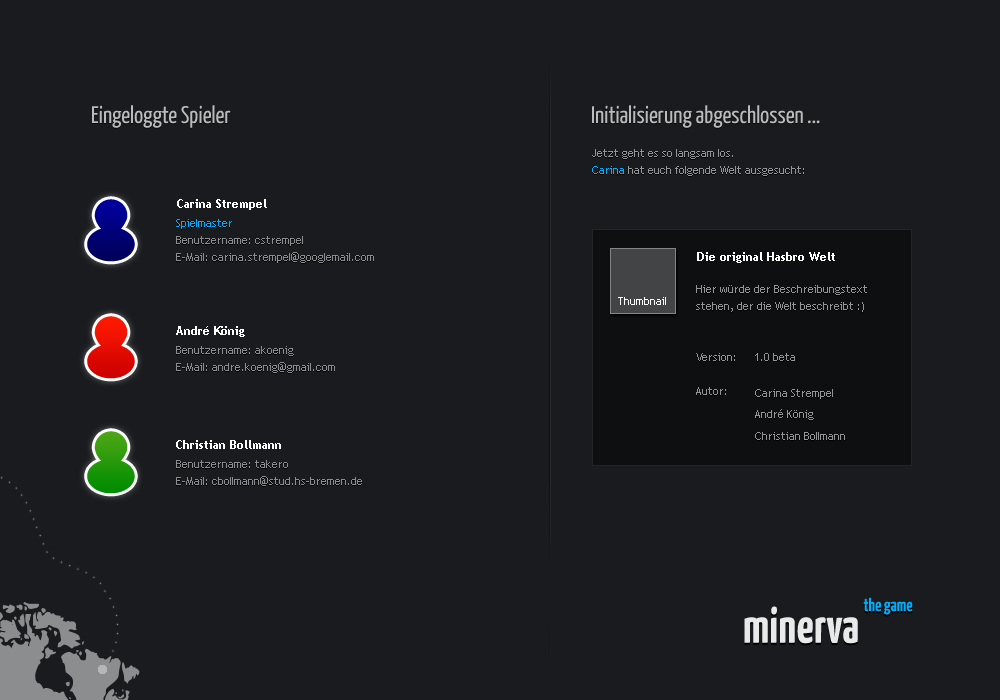
<style>
.page{position:relative;width:1000px;height:700px;background:#191b1e}
.page>*{position:absolute;margin:0}
.t1{font:24px "YanoneKaffeesatz-Regular";color:#babbbc}
.t2{font:11px/17px "TrebuchetMS";color:#939598}
.t3{font:11px/17px "TrebuchetMS";color:#01aefd}
.t4{font:12px "TrebuchetMS-Bold";color:#ffffff}
.t5{font:11px/17px "TrebuchetMS";color:#8c8d8f}
.t6{font:11px "TrebuchetMS";color:#ffffff}
.t7{font:11px "TrebuchetMS";color:#939598}
.t8{font:50px "YanoneKaffeesatz-Bold";color:#ffffff}
.t9{font:18px "YanoneKaffeesatz-Bold";color:#01aefd}
</style>
<div class="page">
<p class="t1" style="left:92px;top:105px;width:139px;height:23px">Eingeloggte Spieler</p>
<p class="t1" style="left:592px;top:105px;width:228px;height:23px">Initialisierung abgeschlossen ...</p>
<p class="t2" style="left:592px;top:149px;width:212px;height:27px">Jetzt geht es so langsam los.<br><span class="t3">Carina </span>hat euch folgende Welt ausgesucht:</p>
<p class="t4" style="left:177px;top:199px;width:90px;height:11px">Carina Strempel</p>
<p class="t5" style="left:176px;top:219px;width:198px;height:44px"><span class="t3">Spielmaster<br></span>Benutzername: cstrempel<br>E-Mail: carina.strempel@googlemail.com</p>
<p class="t4" style="left:697px;top:252px;width:138px;height:11px">Die original Hasbro Welt</p>
<p class="t2" style="left:696px;top:285px;width:171px;height:110px">Hier würde der Beschreibungstext<br>stehen, der die Welt beschreibt :)<br><br><br>Version:<br><br>Autor:</p>
<p class="t6" style="left:618px;top:297px;width:48px;height:8px">Thumbnail</p>
<p class="t4" style="left:176px;top:326px;width:69px;height:11px">André König</p>
<p class="t5" style="left:176px;top:346px;width:159px;height:27px">Benutzername: akoenig<br>E-Mail: andre.koenig@gmail.com</p>
<p class="t7" style="left:755px;top:353px;width:40px;height:8px">1.0 beta</p>
<p class="t7" style="left:755px;top:389px;width:78px;height:10px">Carina Strempel</p>
<p class="t7" style="left:755px;top:409px;width:59px;height:11px">André König</p>
<p class="t7" style="left:755px;top:432px;width:90px;height:8px">Christian Bollmann</p>
<p class="t4" style="left:176px;top:440px;width:105px;height:9px">Christian Bollmann</p>
<p class="t5" style="left:176px;top:460px;width:186px;height:26px">Benutzername: takero<br>E-Mail: cbollmann@stud.hs-bremen.de</p>
<p class="t8" style="left:744px;top:606px;width:114px;height:38px">minerva</p>
<p class="t9" style="left:863px;top:597px;width:50px;height:18px">the game</p>
</div>
